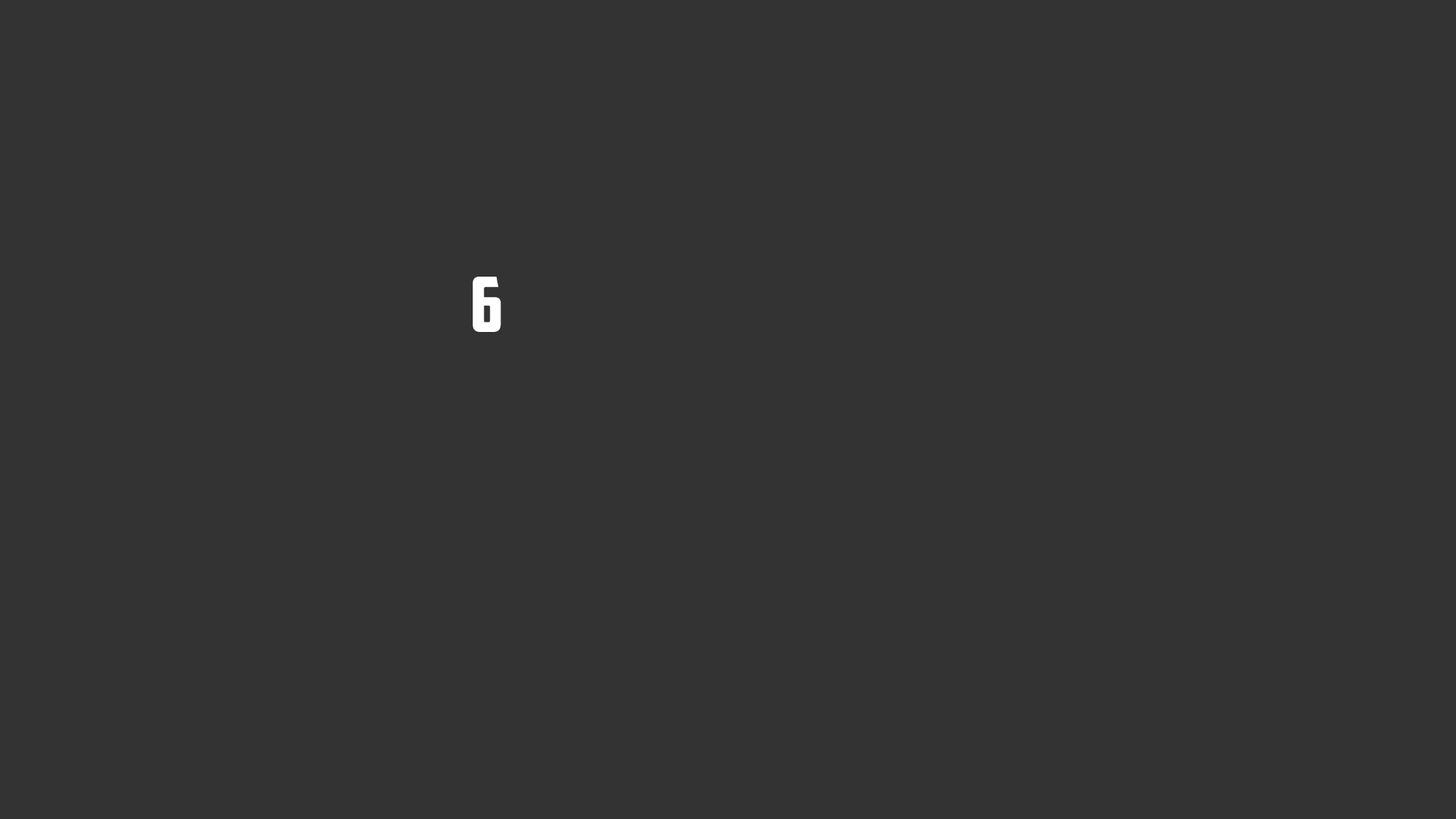
<style>
.page{position:relative;width:1456px;height:819px;background:#333333}
.page>*{position:absolute;margin:0}
.t1{font:75.9px "AmericanCaptain";color:#ffffff}
</style>
<div class="page">
<p class="t1" style="left:473px;top:277px;width:28px;height:55px">6</p>
</div>
